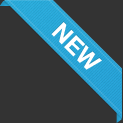
<style>
.page{position:relative;width:123px;height:123px;background:#333333}
.page>*{position:absolute;margin:0}
.t1{font:24px "HelveticaNeue-Bold";color:#ffffff;text-transform:uppercase}
</style>
<div class="page">
<p class="t1" style="left:51px;top:22px;width:51px;height:48px;rotate:45deg">NEW</p>
</div>
